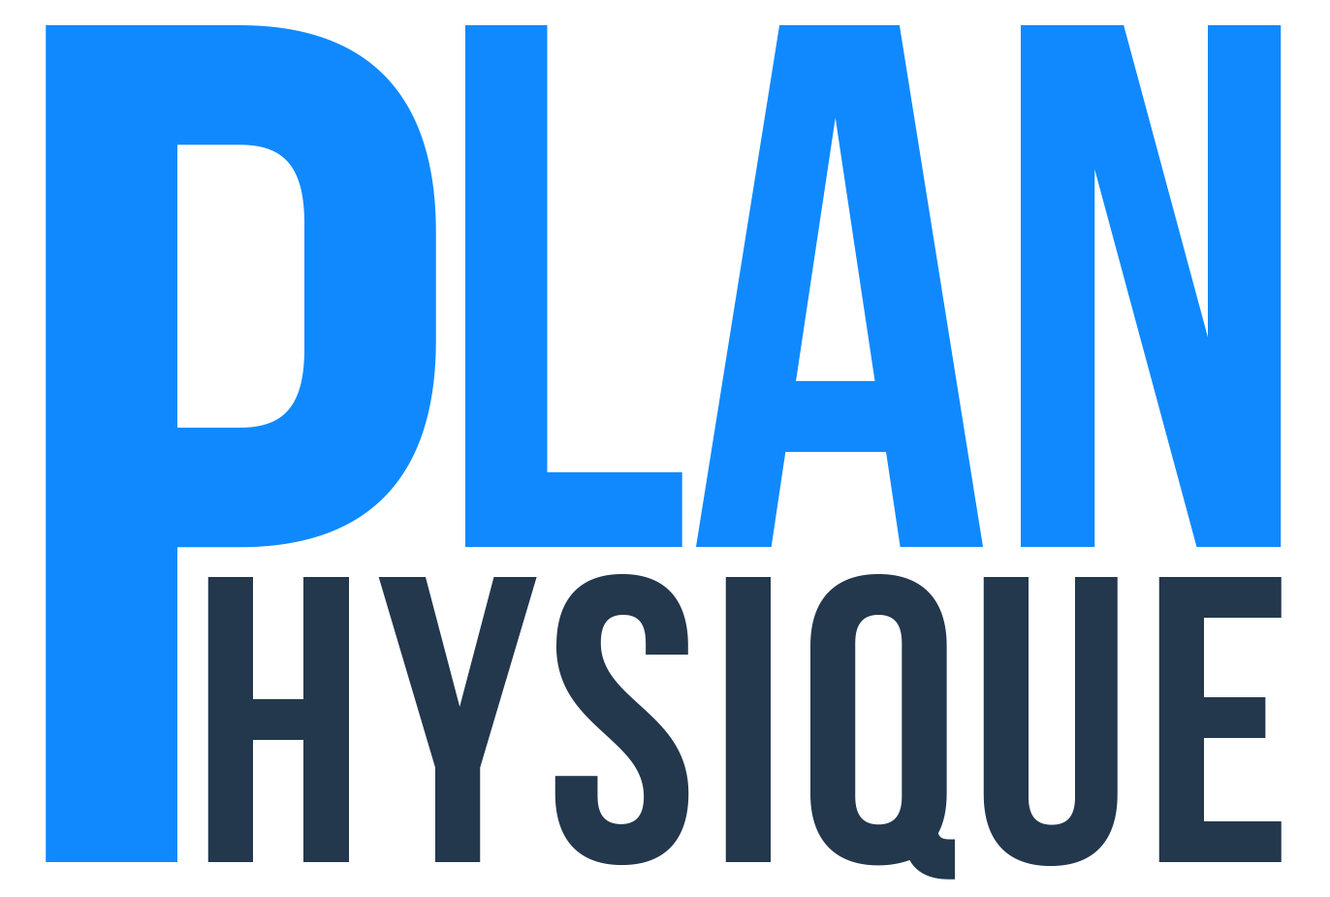
<style>
.page{position:relative;width:1330px;height:897px;background:#ffffff}
.page>*{position:absolute;margin:0}
.t1{font:1195.5px "BebasNeueBold";color:#1089ff}
.t2{font:745.4px "BebasNeueBold";color:#1089ff}
.t3{font:406.9px "BebasNeueBold";letter-spacing:0.027em;color:#23374d}
</style>
<div class="page">
<p class="t1" style="left:46px;top:25px;width:390px;height:837px">p</p>
<p class="t2" style="left:465px;top:25px;width:816px;height:523px">lan</p>
<p class="t3" style="left:207px;top:574px;width:1074px;height:305px">hysique</p>
</div>
